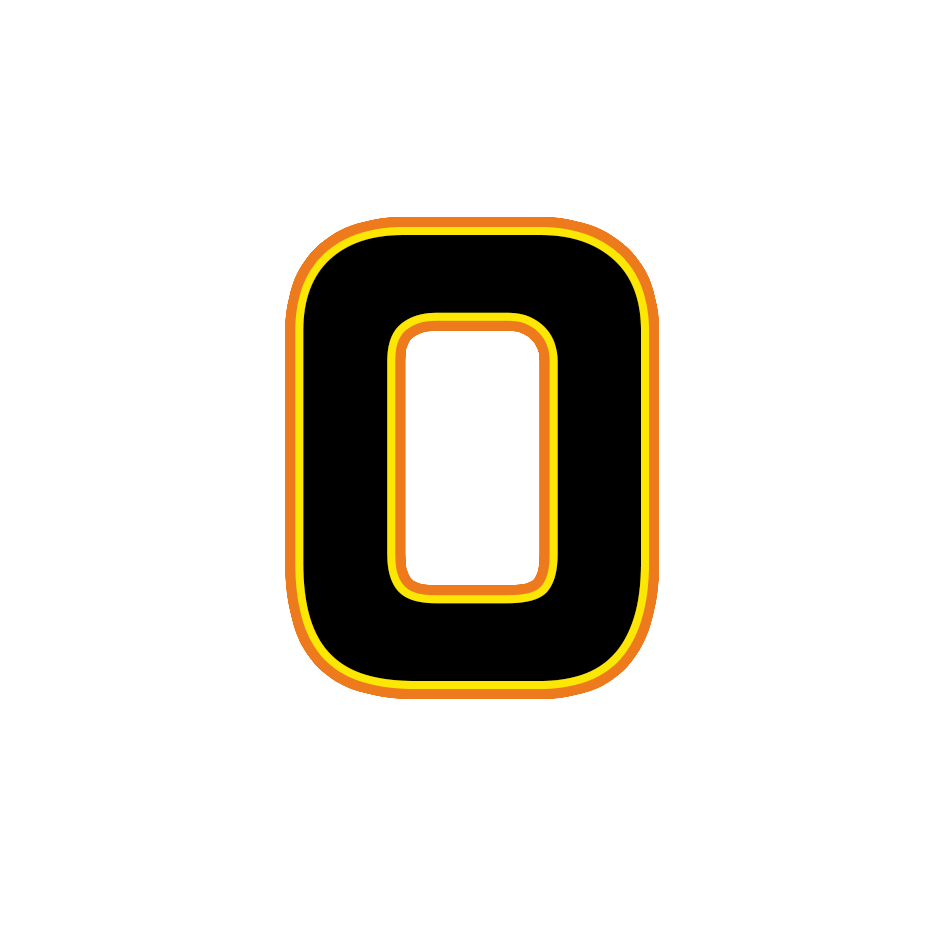
<style>
.page{position:relative;width:926px;height:926px;background:#ffffff}
.page>*{position:absolute;margin:0}
.t1{font:622.2px "Prototype";color:#000000}
</style>
<div class="page">
<p class="t1" style="left:303px;top:235px;width:338px;height:446px">0</p>
</div>
